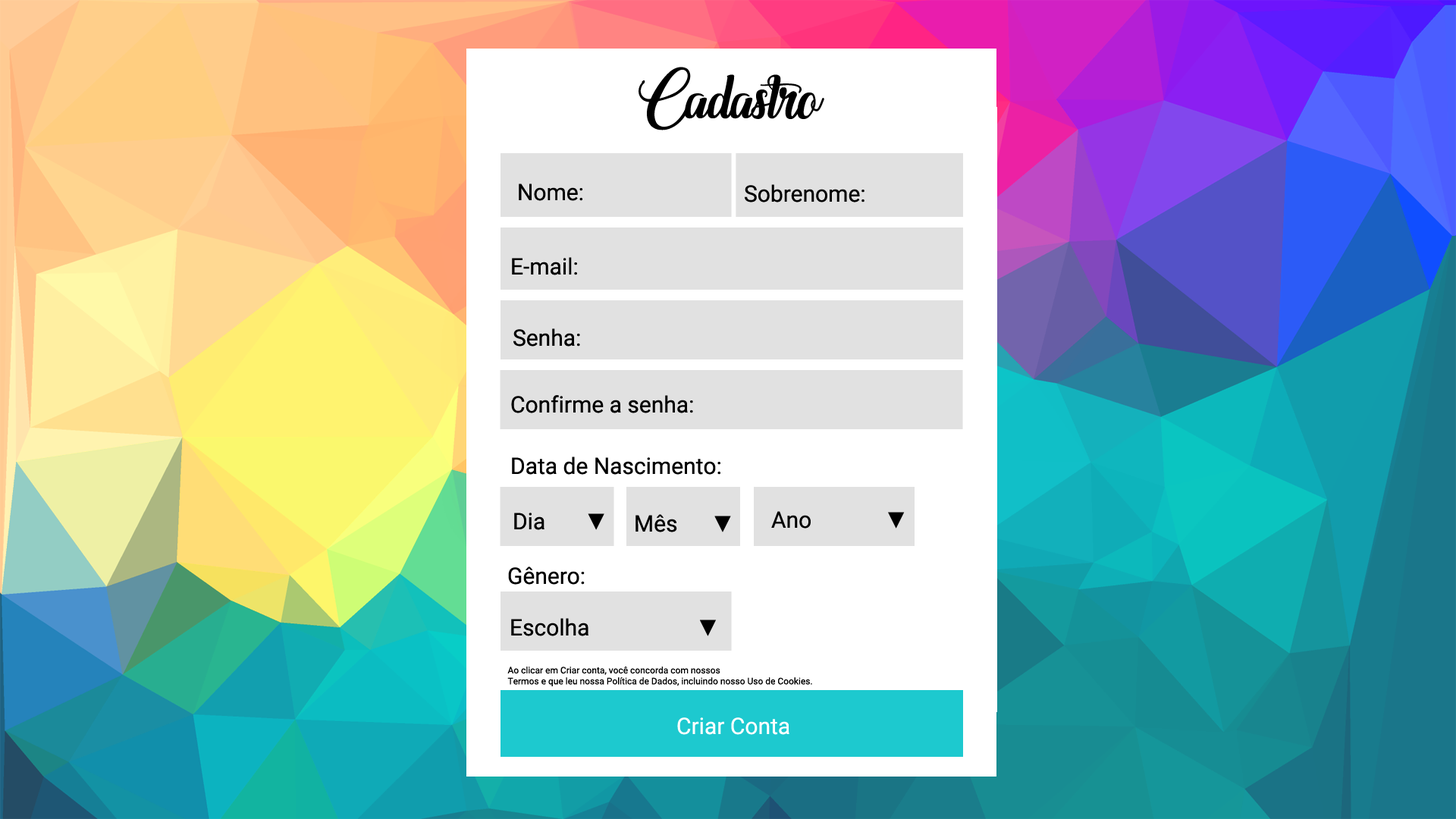
<style>
.page{position:relative;width:1456px;height:819px}
.page>*{position:absolute;margin:0}
.t1{font:113.7px "Marchand-de-Venise";color:#000000}
.t2{font:22.7px "Roboto-Regular";color:#000000}
.t3{font:22.7px "TimesNewRomanPSMT";color:#000000}
.t4{font:9.1px "Roboto-Regular";color:#000000}
.t5{font:22.7px "Roboto-Regular";color:#ffffff}
</style>
<div class="page">
<p class="t1" style="left:639px;top:67px;width:185px;height:63px">Cadastro</p>
<p class="t2" style="left:519px;top:184px;width:64px;height:17px">Nome:</p>
<p class="t2" style="left:745px;top:184px;width:119px;height:18px">Sobrenome:</p>
<p class="t2" style="left:512px;top:257px;width:65px;height:18px">E-mail:</p>
<p class="t2" style="left:513px;top:328px;width:67px;height:19px">Senha:</p>
<p class="t2" style="left:511px;top:395px;width:182px;height:18px">Confirme a senha:</p>
<p class="t2" style="left:512px;top:457px;width:208px;height:18px">Data de Nascimento:</p>
<p class="t2" style="left:514px;top:513px;width:90px;height:17px">Dia       <span class="t3">▼</span></p>
<p class="t2" style="left:635px;top:514px;width:96px;height:18px">Mês      <span class="t3">▼</span></p>
<p class="t2" style="left:771px;top:511px;width:134px;height:18px">Ano             <span class="t3">▼</span></p>
<p class="t2" style="left:508px;top:566px;width:77px;height:19px">Gênero:</p>
<p class="t2" style="left:511px;top:618px;width:205px;height:18px">Escolha                   <span class="t3">▼</span></p>
<p class="t4" style="left:507px;top:667px;width:305px;height:19px">Ao clicar em Criar conta, você concorda com nossos <br>Termos e que leu nossa Política de Dados, incluindo nosso Uso de Cookies.</p>
<p class="t5" style="left:677px;top:717px;width:112px;height:18px">Criar Conta</p>
</div>
